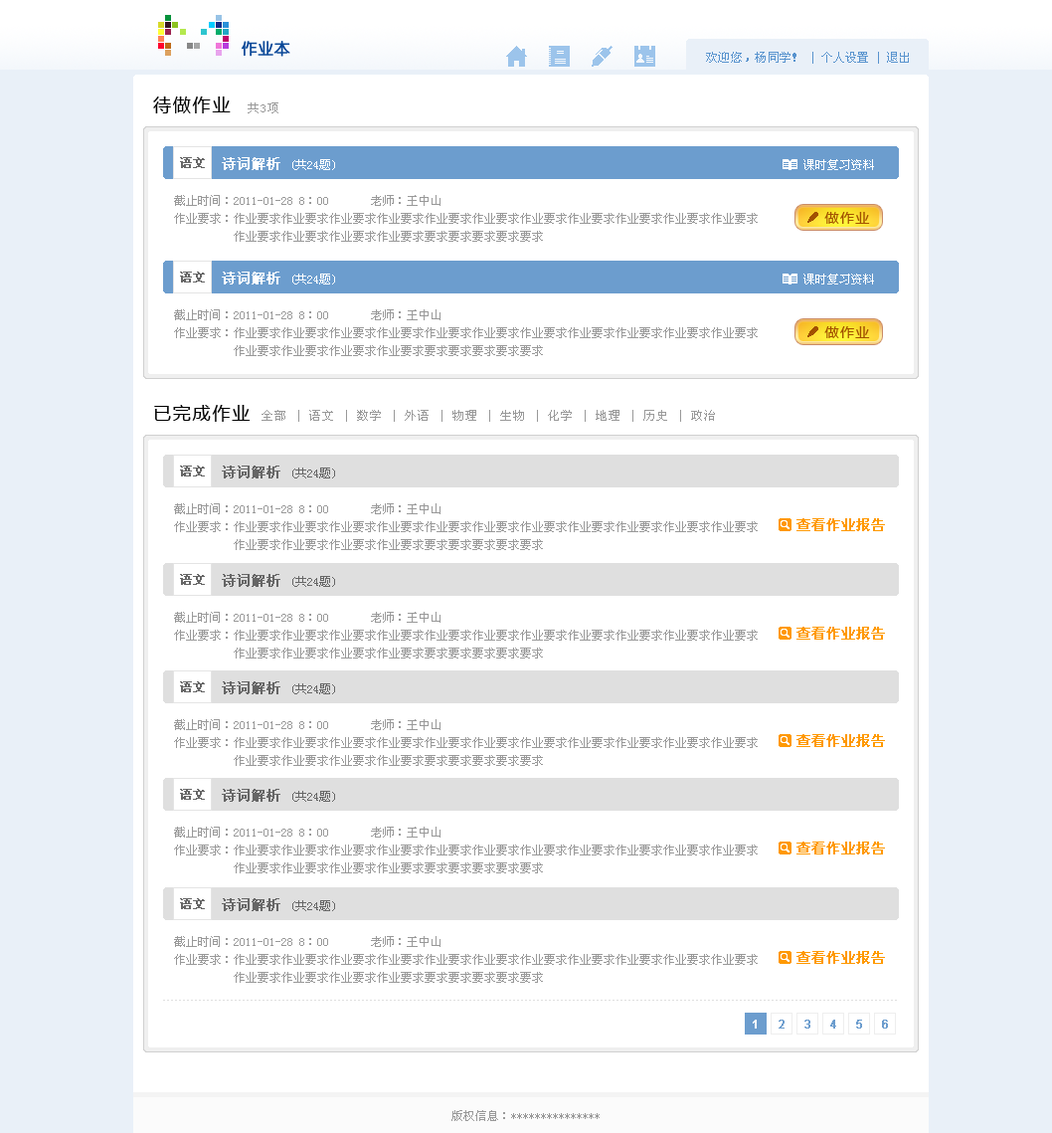
<style>
.page{position:relative;width:1052px;height:1133px;background:#ffffff}
.page>*{position:absolute;margin:0}
.t1{font:15.9px "HYe3gj";color:#0a4898;font-weight:bold}
.t2{font:11.9px "SimSun";color:#5893ce}
.t3{font:11.9px "SimSun";letter-spacing:0.025em;color:#5893ce}
.t4{font:17.9px "MicrosoftYaHei";letter-spacing:0.1em;color:#000000}
.t5{font:11.9px "SimSun";letter-spacing:0.1em;color:#999999}
.t6{font:11.9px/17.9px "SimSun";color:#999999}
.t7{font:11.9px/29.8px "SimSun";color:#666666}
.t8{font:13.9px/29.8px "SimSun";color:#ffffff;font-weight:bold}
.t9{font:11.9px/29.8px "SimSun";color:#ffffff}
.t10{font:11.9px/35.8px "SimSun";color:#ffffff}
.t11{font:11.9px/35.8px "SimSun";color:#999999}
.t12{font:11.9px "SimSun";color:#666666;font-weight:bold}
.t13{font:13.9px "MicrosoftYaHei";letter-spacing:0.1em;color:#a25100}
.t14{font:13.9px/29.8px "SimSun";color:#666666;font-weight:bold}
.t15{font:13.9px "SimSun";color:#ff9900;font-weight:bold}
.t16{font:11.9px "SimSun";color:#999999}
</style>
<div class="page">
<p class="t1" style="left:242px;top:41px;width:48px;height:16px">作业本</p>
<p class="t2" style="left:706px;top:52px;width:203px;height:12px"><span class="t3">欢迎您，杨同学！</span> | 个人设置 | 退出</p>
<p class="t4" style="left:153px;top:96px;width:78px;height:17px">待做作业</p>
<p class="t5" style="left:248px;top:102px;width:31px;height:11px">共3项</p>
<p class="t6" style="left:174px;top:157px;width:700px;height:85px"><span class="t7">        </span><span class="t8">诗词解析 </span><span class="t9">(共24题)                                                                              </span><span class="t10">课时复习资料       <br></span><span class="t11">截止时间：2011</span>-01-28 8：00       老师：王中山       <br>作业要求：作业要求作业要求作业要求作业要求作业要求作业要求作业要求作业要求作业要求作业要求作业要求<br>          作业要求作业要求作业要求作业要求要求要求要求要求要求</p>
<p class="t12" style="left:180px;top:157px;width:25px;height:11px">语文</p>
<p class="t13" style="left:825px;top:212px;width:45px;height:12px">做作业</p>
<p class="t6" style="left:174px;top:272px;width:700px;height:84px"><span class="t7">        </span><span class="t8">诗词解析 </span><span class="t9">(共24题)                                                                              </span><span class="t10">课时复习资料       <br></span><span class="t11">截止时间：2011</span>-01-28 8：00       老师：王中山       <br>作业要求：作业要求作业要求作业要求作业要求作业要求作业要求作业要求作业要求作业要求作业要求作业要求<br>          作业要求作业要求作业要求作业要求要求要求要求要求要求</p>
<p class="t12" style="left:180px;top:272px;width:25px;height:11px">语文</p>
<p class="t13" style="left:825px;top:326px;width:45px;height:12px">做作业</p>
<p class="t4" style="left:154px;top:405px;width:97px;height:17px">已完成作业</p>
<p class="t5" style="left:262px;top:410px;width:453px;height:12px">全部 | 语文 | 数学 | 外语 | 物理 | 生物 | 化学 | 地理 | 历史 | 政治</p>
<p class="t6" style="left:174px;top:466px;width:584px;height:84px"><span class="t7">        </span><span class="t14">诗词解析 </span><span class="t7">(共24题)                                                                                 <br></span><span class="t11">截止时间：2011</span>-01-28 8：00       老师：王中山       <br>作业要求：作业要求作业要求作业要求作业要求作业要求作业要求作业要求作业要求作业要求作业要求作业要求<br>          作业要求作业要求作业要求作业要求要求要求要求要求要求</p>
<p class="t12" style="left:180px;top:466px;width:25px;height:10px">语文</p>
<p class="t15" style="left:797px;top:518px;width:88px;height:13px">查看作业报告</p>
<p class="t6" style="left:174px;top:574px;width:584px;height:85px"><span class="t7">        </span><span class="t14">诗词解析 </span><span class="t7">(共24题)                                                                                 <br></span><span class="t11">截止时间：2011</span>-01-28 8：00       老师：王中山       <br>作业要求：作业要求作业要求作业要求作业要求作业要求作业要求作业要求作业要求作业要求作业要求作业要求<br>          作业要求作业要求作业要求作业要求要求要求要求要求要求</p>
<p class="t12" style="left:180px;top:574px;width:25px;height:11px">语文</p>
<p class="t15" style="left:797px;top:627px;width:88px;height:13px">查看作业报告</p>
<p class="t6" style="left:174px;top:681px;width:584px;height:85px"><span class="t7">        </span><span class="t14">诗词解析 </span><span class="t7">(共24题)                                                                                 <br></span><span class="t11">截止时间：2011</span>-01-28 8：00       老师：王中山       <br>作业要求：作业要求作业要求作业要求作业要求作业要求作业要求作业要求作业要求作业要求作业要求作业要求<br>          作业要求作业要求作业要求作业要求要求要求要求要求要求</p>
<p class="t12" style="left:180px;top:681px;width:25px;height:11px">语文</p>
<p class="t15" style="left:797px;top:734px;width:88px;height:13px">查看作业报告</p>
<p class="t6" style="left:174px;top:789px;width:584px;height:84px"><span class="t7">        </span><span class="t14">诗词解析 </span><span class="t7">(共24题)                                                                                 <br></span><span class="t11">截止时间：2011</span>-01-28 8：00       老师：王中山       <br>作业要求：作业要求作业要求作业要求作业要求作业要求作业要求作业要求作业要求作业要求作业要求作业要求<br>          作业要求作业要求作业要求作业要求要求要求要求要求要求</p>
<p class="t12" style="left:180px;top:789px;width:25px;height:11px">语文</p>
<p class="t15" style="left:797px;top:842px;width:88px;height:12px">查看作业报告</p>
<p class="t6" style="left:174px;top:898px;width:584px;height:85px"><span class="t7">        </span><span class="t14">诗词解析 </span><span class="t7">(共24题)                                                                                 <br></span><span class="t11">截止时间：2011</span>-01-28 8：00       老师：王中山       <br>作业要求：作业要求作业要求作业要求作业要求作业要求作业要求作业要求作业要求作业要求作业要求作业要求<br>          作业要求作业要求作业要求作业要求要求要求要求要求要求</p>
<p class="t12" style="left:180px;top:898px;width:25px;height:11px">语文</p>
<p class="t15" style="left:797px;top:951px;width:88px;height:13px">查看作业报告</p>
<p class="t16" style="left:452px;top:1110px;width:148px;height:11px">版权信息：***************</p>
</div>
